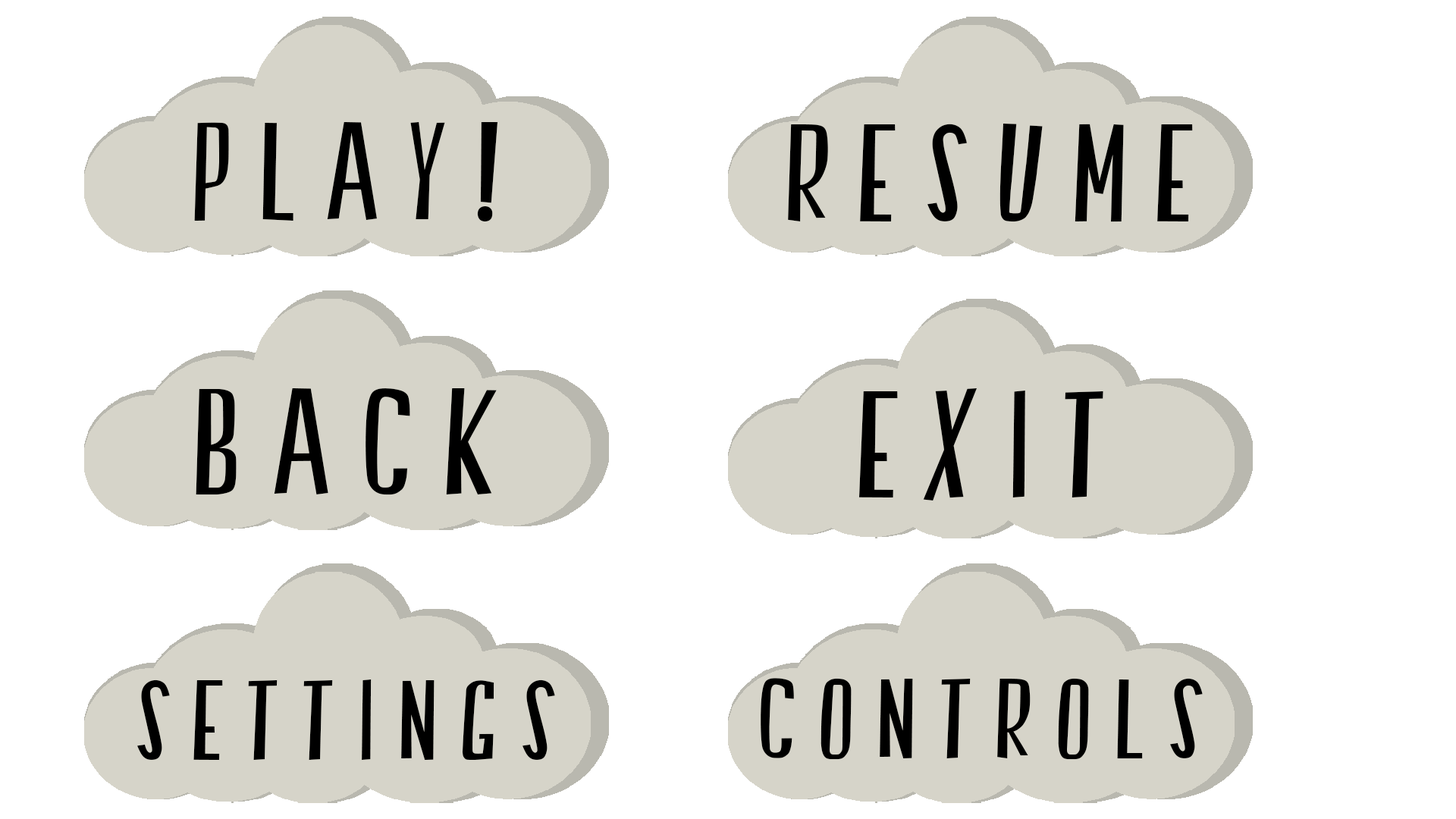
<style>
.page{position:relative;width:1456px;height:819px;background:#ffffff}
.page>*{position:absolute;margin:0}
.t1{font:139.3px "SwallowFalls";letter-spacing:0.2em;color:#000000}
.t2{font:139px "SwallowFalls";letter-spacing:0.2em;color:#000000}
.t3{font:151.7px "SwallowFalls";letter-spacing:0.2em;color:#000000}
.t4{font:113.7px "SwallowFalls";letter-spacing:0.2em;color:#000000}
</style>
<div class="page">
<p class="t1" style="left:194px;top:122px;width:304px;height:99px">play!</p>
<p class="t2" style="left:788px;top:124px;width:405px;height:98px">Resume</p>
<p class="t3" style="left:196px;top:388px;width:301px;height:107px">Back</p>
<p class="t3" style="left:859px;top:388px;width:244px;height:112px">Exit</p>
<p class="t4" style="left:761px;top:678px;width:442px;height:82px">controls</p>
<p class="t4" style="left:137px;top:679px;width:418px;height:81px">Settings</p>
</div>
